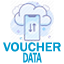
<style>
.page{position:relative;width:64px;height:64px;background:#ffffff}
.page>*{position:absolute;margin:0}
.t1{font:13px "FranklinGothic-Medium";color:#0099cc;scale:1.07 1}
.t2{font:14.5px "FranklinGothic-Medium";color:#0099cc;scale:0.59 1}
</style>
<div class="page">
<p class="t1" style="left:3px;top:42px;width:58px;height:10px">VOUCHER</p>
<p class="t2" style="left:23px;top:52px;width:19px;height:11px">DATA</p>
</div>
